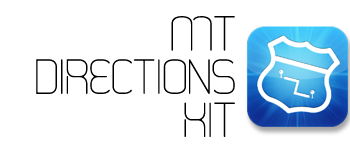
<style>
.page{position:relative;width:350px;height:150px;background:#ffffff}
.page>*{position:absolute;margin:0}
.t1{font:36px "happysquid";color:#000000}
</style>
<div class="page">
<p class="t1" style="left:36px;top:16px;width:199px;height:121px;text-align:right">MT<br>directions<br>kit</p>
</div>
